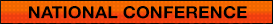
<style>
.page{position:relative;width:273px;height:24px}
.page>*{position:absolute;margin:0}
.t1{font:16.7px "AlteHaasGrotesk_Bold";color:#000000;scale:1.07 1}
</style>
<div class="page">
<p class="t1" style="left:29px;top:6px;width:218px;height:13px">NATIONAL CONFERENCE</p>
</div>
